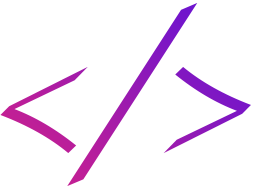
<style>
.page{position:relative;width:260px;height:189px;background:#ffffff}
.page>*{position:absolute;margin:0}
.t1{font:167.2px "Apple-Chancery"}
</style>
<div class="page">
<p class="t1" style="left:0px;top:3px;width:251px;height:183px">&lt;/&gt;</p>
</div>
